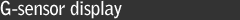
<style>
.page{position:relative;width:240px;height:20px;background:#333333}
.page>*{position:absolute;margin:0}
.t1{font:19px "BellGothicStd-Bold";letter-spacing:-0.025em;color:#ffffff}
</style>
<div class="page">
<p class="t1" style="left:0px;top:0px;width:122px;height:19px">G-sensor display</p>
</div>
